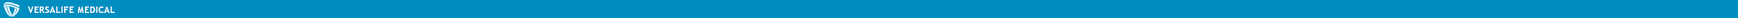
<style>
.page{position:relative;width:1738px;height:18px;background:#008ec0}
.page>*{position:absolute;margin:0}
.t1{font:9px "TrebuchetMS-Bold";letter-spacing:0.025em;color:#ffffff}
</style>
<div class="page">
<p class="t1" style="left:27px;top:6px;width:88px;height:7px">VERSALIFE MEDICAL</p>
</div>
